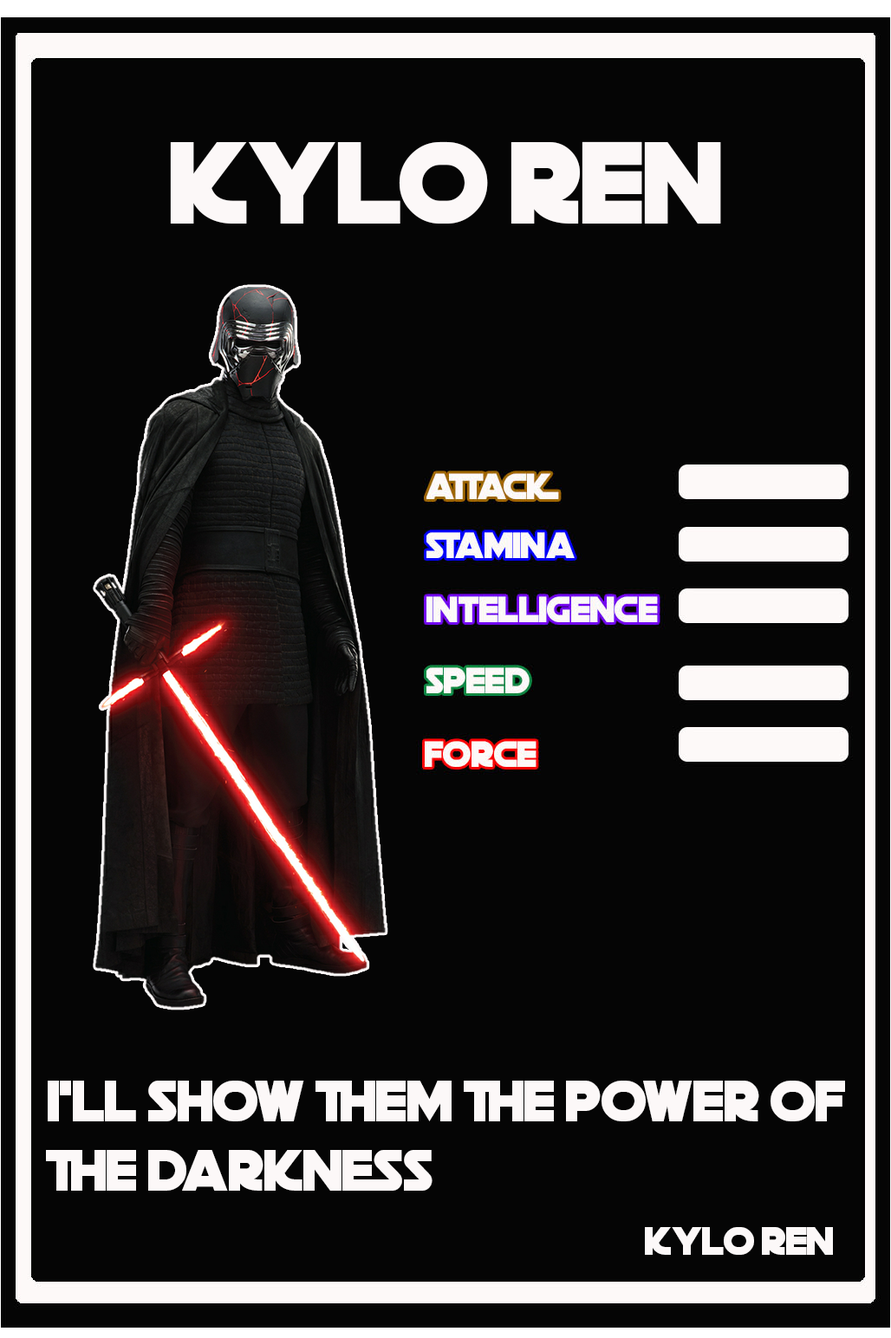
<style>
.page{position:relative;width:891px;height:1338px;background:#050505}
.page>*{position:absolute;margin:0}
.t1{font:115.4px "DeathStar";color:#fcf8f8}
.t2{font:57.6px "DeathStar";color:#fcf8f8}
.t3{font:39.6px "DeathStar";color:#fcf8f8}
</style>
<div class="page">
<p class="t1" style="left:170px;top:141px;width:551px;height:83px">kylo ren</p>
<p class="t2" style="left:46px;top:1081px;width:799px;height:110px">“I'll show them the power of <br>the darkness”</p>
<p class="t3" style="left:645px;top:1227px;width:188px;height:28px">kylo ren</p>
</div>
